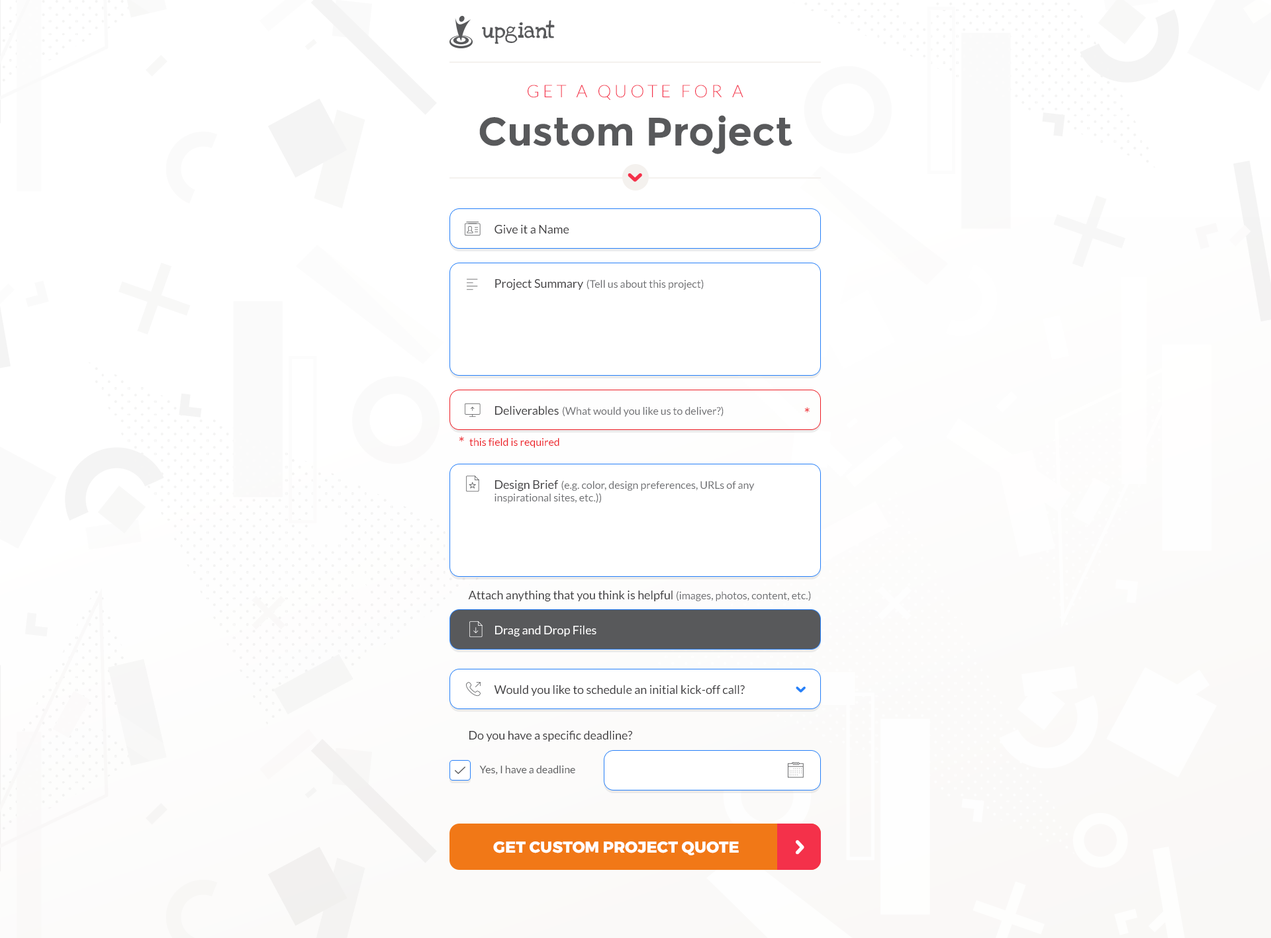
<style>
.page{position:relative;width:1271px;height:938px;background:#ffffff}
.page>*{position:absolute;margin:0}
.t1{font:15.9px "LoveYaLikeASisterSolid";color:#58595b}
.t2{font:17.2px "Lato-Light";color:#f4314a;text-transform:uppercase}
.t3{font:39.7px "Montserrat-Bold";color:#58595b}
.t4{font:11.9px "Lato-Regular";color:#414042}
.t5{font:10.6px "Lato-Regular";color:#6d6e71}
.t6{font:15.9px "Lato-Regular";color:#ed1c24}
.t7{font:10.6px "Lato-Regular";color:#ed1c24}
.t8{font:11.9px "Lato-Regular";color:#ffffff}
.t9{font:10.6px "Lato-Regular";color:#58595b}
.t10{font:15.9px "Montserrat-ExtraBold";color:#ffffff}
</style>
<div class="page">
<p class="t1" style="left:482px;top:20px;width:73px;height:24px">upgiant</p>
<p class="t2" style="left:527px;top:85px;width:216px;height:15px">G E T   A   Q U O T E   F O R   A</p>
<p class="t3" style="left:479px;top:115px;width:313px;height:39px">Custom Project</p>
<p class="t4" style="left:494px;top:224px;width:75px;height:10px">Give it a Name</p>
<p class="t5" style="left:495px;top:279px;width:208px;height:12px"><span class="t4">Project Summary </span>(Tell us about this project)</p>
<p class="t5" style="left:495px;top:406px;width:228px;height:11px"><span class="t4">Deliverables </span>(What would you like us to deliver?)</p>
<p class="t6" style="left:804px;top:407px;width:5px;height:6px">*</p>
<p class="t7" style="left:459px;top:436px;width:100px;height:12px"><span class="t6">* </span>this field is required</p>
<p class="t5" style="left:494px;top:480px;width:260px;height:24px"><span class="t4">Design Brief </span>(e.g. color, design preferences, URLs of any <br>inspirational sites, etc.))</p>
<p class="t4" style="left:468px;top:590px;width:343px;height:12px">Attach anything that you think is helpful <span class="t5">(images, photos, content, etc.)</span></p>
<p class="t8" style="left:495px;top:625px;width:101px;height:12px">Drag and Drop Files</p>
<p class="t4" style="left:494px;top:685px;width:251px;height:11px">Would you like to schedule an initial kick-off call?</p>
<p class="t4" style="left:469px;top:731px;width:163px;height:11px">Do you have a specific deadline?</p>
<p class="t9" style="left:479px;top:766px;width:96px;height:10px">Yes, I have a deadline</p>
<p class="t10" style="left:493px;top:842px;width:246px;height:14px">GET CUSTOM PROJECT QUOTE</p>
</div>
